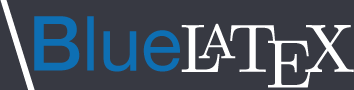
<style>
.page{position:relative;width:354px;height:90px;background:#373942}
.page>*{position:absolute;margin:0}
.t1{font:118px "HelveticaNeue-Light";color:#ffffff}
.t2{font:76px "HelveticaNeue";color:#0e6fb3}
.t3{font:76px "HelveticaNeue-Medium";color:#0e6fb3}
</style>
<div class="page">
<p class="t1" style="left:0px;top:0px;width:35px;height:91px;rotate:5deg">\</p>
<p class="t2" style="left:34px;top:16px;width:146px;height:56px"><span class="t3">B</span>lue</p>
</div>
